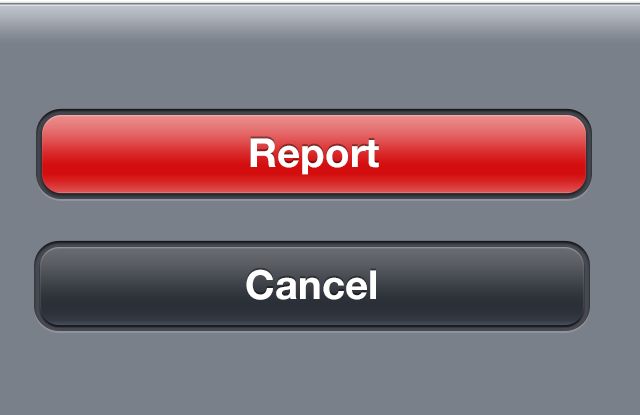
<style>
.page{position:relative;width:640px;height:415px;background:#798089}
.page>*{position:absolute;margin:0}
.t1{font:40px "HelveticaNeue-Bold";letter-spacing:0.005em;color:#ffffff}
</style>
<div class="page">
<p class="t1" style="left:250px;top:138px;width:129px;height:37px">Report</p>
<p class="t1" style="left:246px;top:269px;width:130px;height:31px">Cancel</p>
</div>
